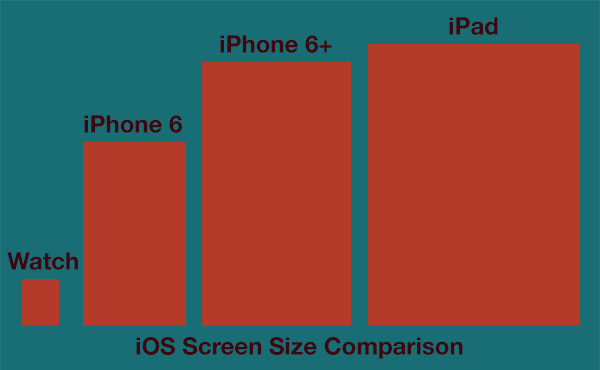
<style>
.page{position:relative;width:600px;height:370px;background:#b43a29}
.page>*{position:absolute;margin:0}
.t1{font:24px "HelveticaNeue-Bold";color:#3b0710}
</style>
<div class="page">
<p class="t1" style="left:449px;top:17px;width:49px;height:18px">iPad</p>
<p class="t1" style="left:220px;top:35px;width:112px;height:18px">iPhone 6+</p>
<p class="t1" style="left:84px;top:115px;width:98px;height:18px">iPhone 6</p>
<p class="t1" style="left:7px;top:252px;width:71px;height:18px">Watch</p>
<p class="t1" style="left:136px;top:337px;width:327px;height:22px">iOS Screen Size Comparison</p>
</div>
